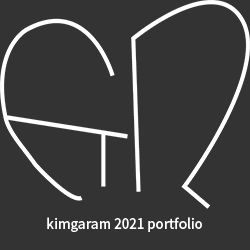
<style>
.page{position:relative;width:250px;height:250px;background:#333333}
.page>*{position:absolute;margin:0}
.t1{font:14px "NotoSansKR-Medium";color:#ffffff;scale:0.94 1}
</style>
<div class="page">
<p class="t1" style="left:47px;top:217px;width:155px;height:15px">kimgaram 2021 portfolio</p>
</div>
